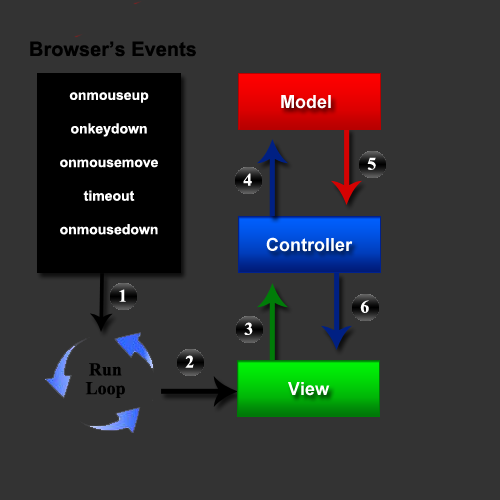
<style>
.page{position:relative;width:500px;height:500px;background:#333333}
.page>*{position:absolute;margin:0}
.t1{font:20px "Arial-BoldMT";color:#000000}
.t2{font:14px "Arial-BoldMT";color:#ffffff}
.t3{font:18px "Arial-BoldMT";color:#ffffff}
.t4{font:18px "TimesNewRomanPS-BoldMT";color:#ffffff}
.t5{font:18px "TimesNewRomanPS-BoldMT";color:#000000}
</style>
<div class="page">
<p class="t1" style="left:30px;top:41px;width:166px;height:16px">Browser’s Events</p>
<p class="t2" style="left:60px;top:92px;width:98px;height:143px;text-align:center">onmouseup<br><br>onkeydown<br><br>onmousemove<br><br>timeout<br><br>onmousedown</p>
<p class="t3" style="left:281px;top:95px;width:50px;height:14px">Model</p>
<p class="t4" style="left:367px;top:157px;width:9px;height:13px">5</p>
<p class="t4" style="left:243px;top:173px;width:9px;height:13px">4</p>
<p class="t3" style="left:266px;top:237px;width:87px;height:15px">Controller</p>
<p class="t4" style="left:119px;top:289px;width:7px;height:13px">1</p>
<p class="t4" style="left:360px;top:300px;width:9px;height:13px">6</p>
<p class="t4" style="left:244px;top:322px;width:9px;height:13px">3</p>
<p class="t5" style="left:89px;top:363px;width:33px;height:13px">Run</p>
<p class="t4" style="left:185px;top:355px;width:9px;height:13px">2</p>
<p class="t5" style="left:85px;top:382px;width:40px;height:16px">Loop</p>
<p class="t3" style="left:288px;top:382px;width:42px;height:14px">View</p>
</div>
